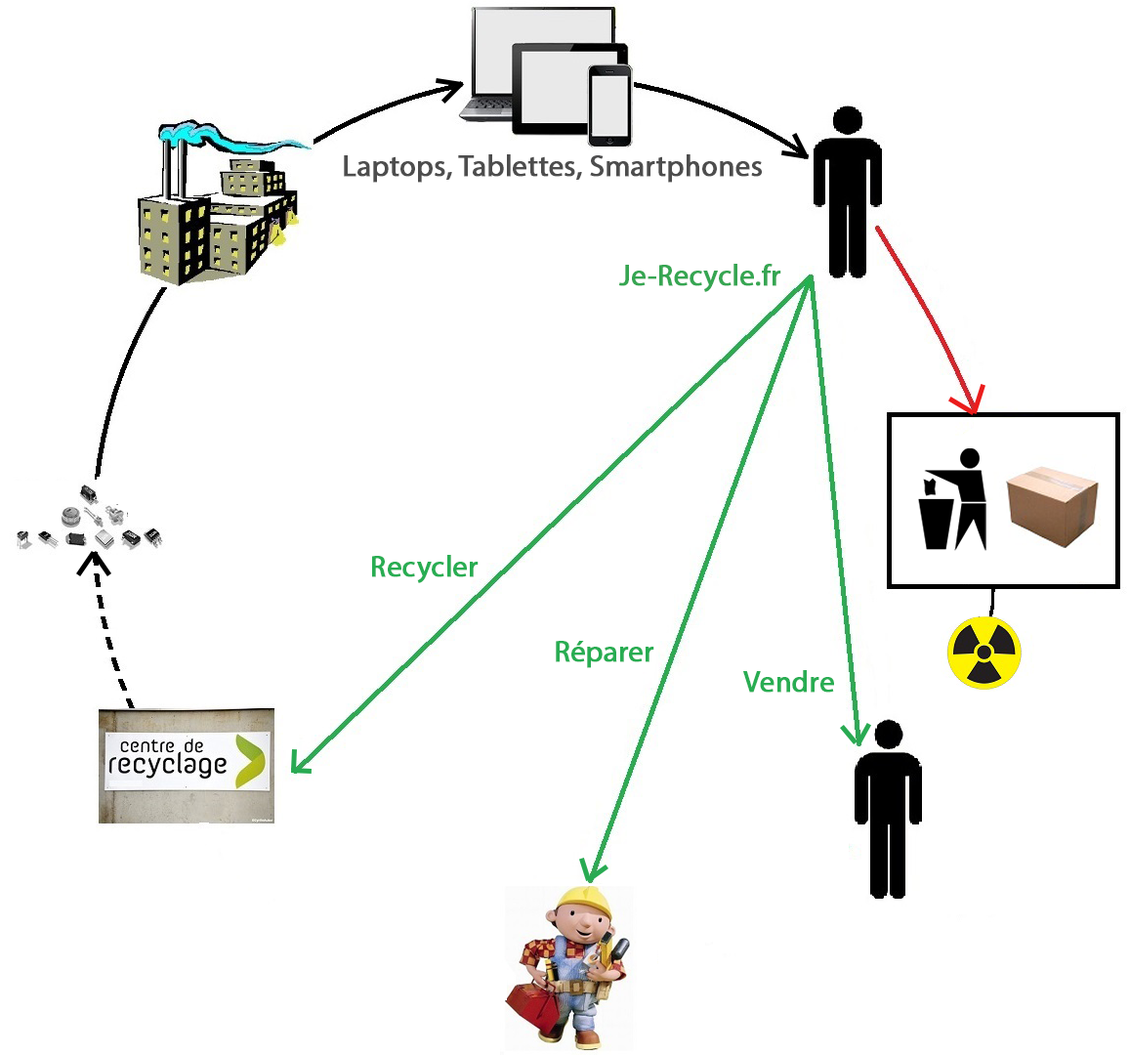
<style>
.page{position:relative;width:1130px;height:1055px;background:#ffffff}
.page>*{position:absolute;margin:0}
.t1{font:29.3px "MyriadPro-Regular";color:#4d4d4d;font-weight:bold}
.t2{font:29.3px "MyriadPro-Regular";color:#36a652;font-weight:bold}
.t3{font:29.3px "MyriadPro-Regular";color:#28ad52;font-weight:bold}
</style>
<div class="page">
<p class="t1" style="left:344px;top:154px;width:418px;height:29px">Laptops, Tablettes, Smartphones</p>
<p class="t2" style="left:619px;top:264px;width:162px;height:28px">Je-Recycle.fr</p>
<p class="t3" style="left:372px;top:555px;width:107px;height:28px">Recycler</p>
<p class="t3" style="left:556px;top:641px;width:99px;height:27px">Réparer</p>
<p class="t3" style="left:743px;top:670px;width:91px;height:23px">Vendre</p>
</div>
